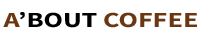
<style>
.page{position:relative;width:200px;height:40px;background:#ffffff}
.page>*{position:absolute;margin:0}
.t1{font:19px "NotoSansKR-ExtraBold";color:#6b3712;scale:1.31 1}
.t2{font:19px "NotoSansKR-ExtraBold";color:#000000;scale:1.31 1}
</style>
<div class="page">
<p class="t1" style="left:3px;top:12px;width:194px;height:16px">A<span class="t2">’BOUT </span>COFFEE</p>
</div>
